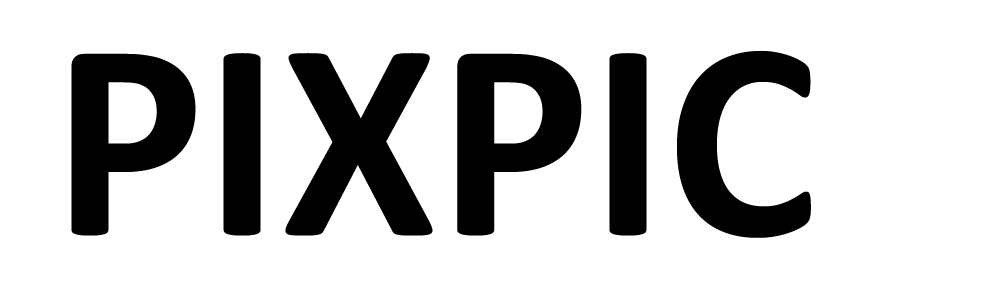
<style>
.page{position:relative;width:1000px;height:290px;background:#ffffff}
.page>*{position:absolute;margin:0}
.t1{font:285.9px "Calibri-Bold";color:#000000}
</style>
<div class="page">
<p class="t1" style="left:71px;top:50px;width:740px;height:188px">PIXPIC</p>
</div>
